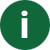
<style>
.page{position:relative;width:50px;height:50px;background:#0f673a}
.page>*{position:absolute;margin:0}
.t1{font:36px "OpenSans-Bold";color:#ffffff}
</style>
<div class="page">
<p class="t1" style="left:21px;top:10px;width:7px;height:28px">i</p>
</div>
